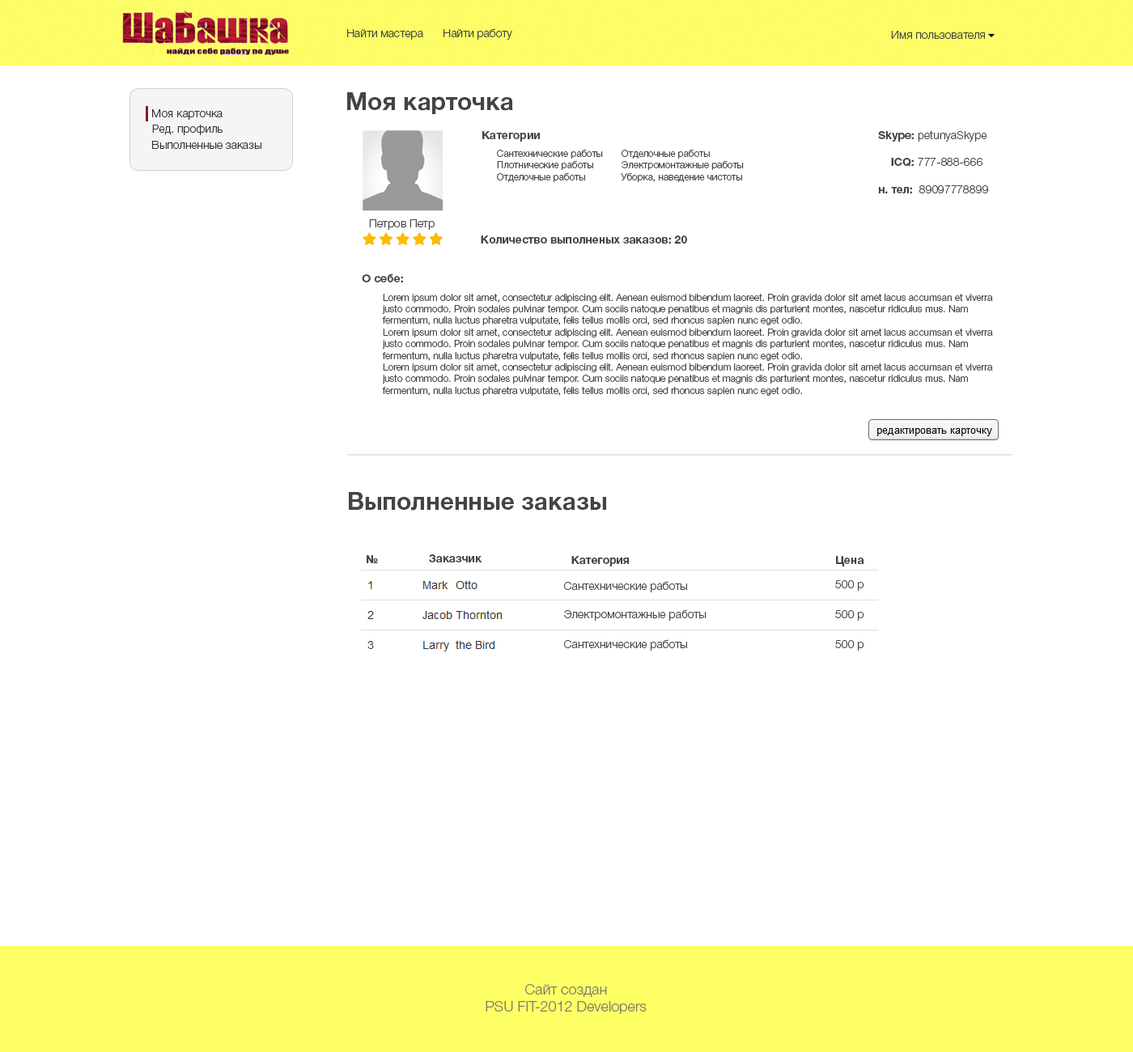
<style>
.page{position:relative;width:1133px;height:1052px;background:#ffffff}
.page>*{position:absolute;margin:0}
.t1{font:11.3px "HelveticaNeueCyr-Light";color:#444241}
.t2{font:24.3px "HelveticaNeueCyr-Bold";color:#444444}
.t3{font:11.3px "HelveticaNeueCyr-Light";color:#333333}
.t4{font:11.3px "HelveticaNeueCyr-Bold";color:#444444}
.t5{font:11.3px "HelveticaNeueCyr-Light";color:#444444}
.t6{font:9.7px "HelveticaNeueCyr-Light";color:#444444}
.t7{font:14.6px "HelveticaNeueCyr-Light";color:#7c7a6a}
</style>
<div class="page">
<p class="t1" style="left:347px;top:29px;width:76px;height:11px">Найти мастера</p>
<p class="t1" style="left:444px;top:28px;width:68px;height:12px">Найти работу</p>
<p class="t1" style="left:891px;top:31px;width:94px;height:8px">Имя пользователя</p>
<p class="t2" style="left:347px;top:92px;width:166px;height:22px">Моя карточка</p>
<p class="t3" style="left:152px;top:109px;width:71px;height:11px">Моя карточка</p>
<p class="t3" style="left:152px;top:125px;width:71px;height:10px">Ред. профиль</p>
<p class="t4" style="left:482px;top:131px;width:58px;height:11px">Категории</p>
<p class="t5" style="left:878px;top:130px;width:110px;height:64px"><span class="t4">Skype: </span>petunyaSkype<br><span class="t4"><br>    ICQ: </span>777-888-666<br><span class="t4"><br>н. тел:  </span>89097778899</p>
<p class="t3" style="left:152px;top:141px;width:109px;height:8px">Выполненные заказы</p>
<p class="t6" style="left:497px;top:150px;width:106px;height:32px">Сантехнические работы<br>Плотнические работы<br>Отделочные работы</p>
<p class="t6" style="left:621px;top:150px;width:123px;height:32px">Отделочные работы<br>Электромонтажные работы<br>Уборка, наведение чистоты</p>
<p class="t5" style="left:369px;top:219px;width:66px;height:11px">Петров Петр</p>
<p class="t4" style="left:481px;top:236px;width:206px;height:8px">Количество выполненых заказов: 20</p>
<p class="t4" style="left:362px;top:274px;width:41px;height:8px">О себе:</p>
<p class="t6" style="left:382px;top:294px;width:611px;height:102px">Lorem ipsum dolor sit amet, consectetur adipiscing elit. Aenean euismod bibendum laoreet. Proin gravida dolor sit amet lacus accumsan et viverra justo commodo. Proin sodales pulvinar tempor. Cum sociis natoque penatibus et magnis dis parturient montes, nascetur ridiculus mus. Nam fermentum, nulla luctus pharetra vulputate, felis tellus mollis orci, sed rhoncus sapien nunc eget odio.<br>Lorem ipsum dolor sit amet, consectetur adipiscing elit. Aenean euismod bibendum laoreet. Proin gravida dolor sit amet lacus accumsan et viverra justo commodo. Proin sodales pulvinar tempor. Cum sociis natoque penatibus et magnis dis parturient montes, nascetur ridiculus mus. Nam fermentum, nulla luctus pharetra vulputate, felis tellus mollis orci, sed rhoncus sapien nunc eget odio.<br>Lorem ipsum dolor sit amet, consectetur adipiscing elit. Aenean euismod bibendum laoreet. Proin gravida dolor sit amet lacus accumsan et viverra justo commodo. Proin sodales pulvinar tempor. Cum sociis natoque penatibus et magnis dis parturient montes, nascetur ridiculus mus. Nam fermentum, nulla luctus pharetra vulputate, felis tellus mollis orci, sed rhoncus sapien nunc eget odio.</p>
<p class="t2" style="left:349px;top:492px;width:257px;height:19px">Выполненные заказы</p>
<p class="t4" style="left:367px;top:555px;width:11px;height:8px">№</p>
<p class="t4" style="left:429px;top:554px;width:53px;height:9px">Заказчик</p>
<p class="t4" style="left:571px;top:556px;width:59px;height:11px">Категория</p>
<p class="t4" style="left:836px;top:556px;width:28px;height:11px">Цена</p>
<p class="t5" style="left:564px;top:581px;width:123px;height:12px">Сантехнические работы</p>
<p class="t5" style="left:835px;top:580px;width:29px;height:11px">500 р</p>
<p class="t5" style="left:564px;top:610px;width:143px;height:11px">Электромонтажные работы</p>
<p class="t5" style="left:835px;top:610px;width:29px;height:11px">500 р</p>
<p class="t5" style="left:564px;top:639px;width:123px;height:12px">Сантехнические работы</p>
<p class="t5" style="left:835px;top:640px;width:29px;height:11px">500 р</p>
<p class="t7" style="left:486px;top:984px;width:161px;height:30px;text-align:center">Сайт создан<br>PSU FIT-2012 Developers</p>
</div>
